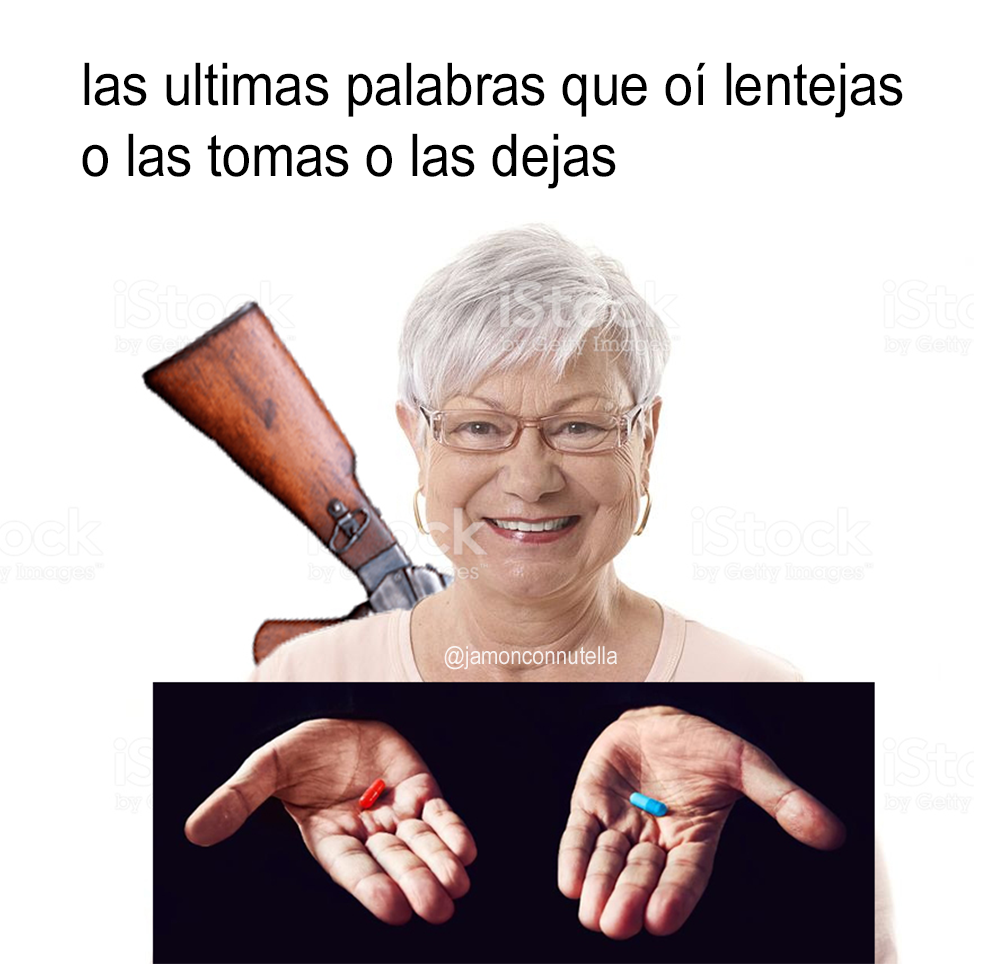
<style>
.page{position:relative;width:985px;height:964px;background:#ffffff}
.page>*{position:absolute;margin:0}
.t1{font:59px "ArialNarrow";color:#000000;scale:1.09 1}
.t2{font:24.9px "ArialNarrow";color:#ffffff;scale:1.03 1}
</style>
<div class="page">
<p class="t1" style="left:82px;top:62px;width:821px;height:127px">las ultimas palabras que oí lentejas <br>o las tomas o las dejas</p>
<p class="t2" style="left:444px;top:646px;width:173px;height:24px;opacity:0.85">@jamonconnutella</p>
</div>
